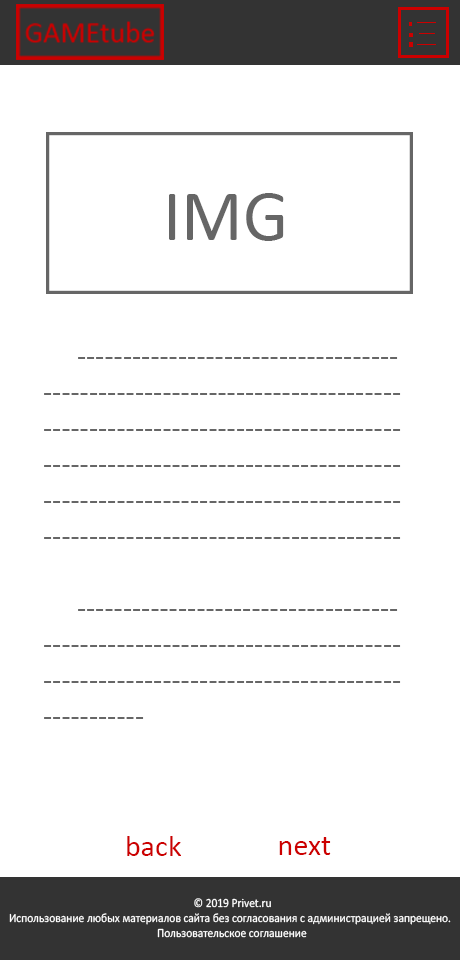
<style>
.page{position:relative;width:460px;height:960px;background:#ffffff}
.page>*{position:absolute;margin:0}
.t1{font:72px "Calibri";color:#666666}
.t2{font:30px "Calibri";color:#666666}
.t3{font:30px "Calibri";color:#cc0000}
.t4{font:12.5px "Calibri";color:#ffffff;scale:0.92 1}
</style>
<div class="page">
<p class="t1" style="left:169px;top:193px;width:115px;height:48px">IMG</p>
<p class="t2" style="left:44px;top:357px;width:357px;height:362px"><span class="t3">     </span>-----------------------------------<br>---------------------------------------<br>---------------------------------------<br>---------------------------------------<br>---------------------------------------<br>---------------------------------------<br><br>     -----------------------------------<br>---------------------------------------<br>---------------------------------------<br>-----------</p>
<p class="t3" style="left:127px;top:836px;width:54px;height:20px">back</p>
<p class="t3" style="left:279px;top:837px;width:52px;height:18px">next</p>
<p class="t4" style="left:9px;top:898px;width:442px;height:40px">© 2019 Privet.ru<br>Использование любых материалов сайта без согласования с администрацией запрещено.<br>                                                         Пользовательское соглашение</p>
</div>
